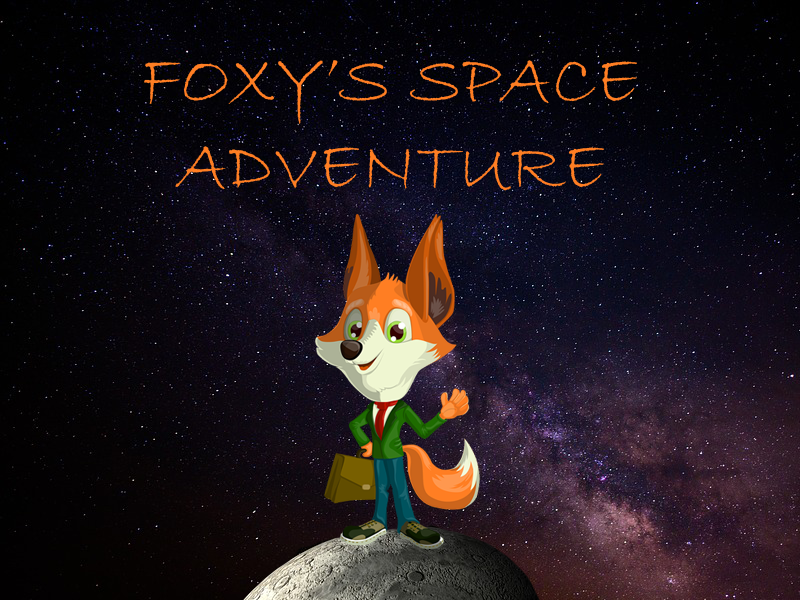
<style>
.page{position:relative;width:800px;height:600px}
.page>*{position:absolute;margin:0}
.t1{font:72px "BradleyHandITC";color:#ff7e23}
</style>
<div class="page">
<p class="t1" style="left:144px;top:60px;width:493px;height:131px">FOXY’S SPACE <br> ADVENTURE</p>
</div>
